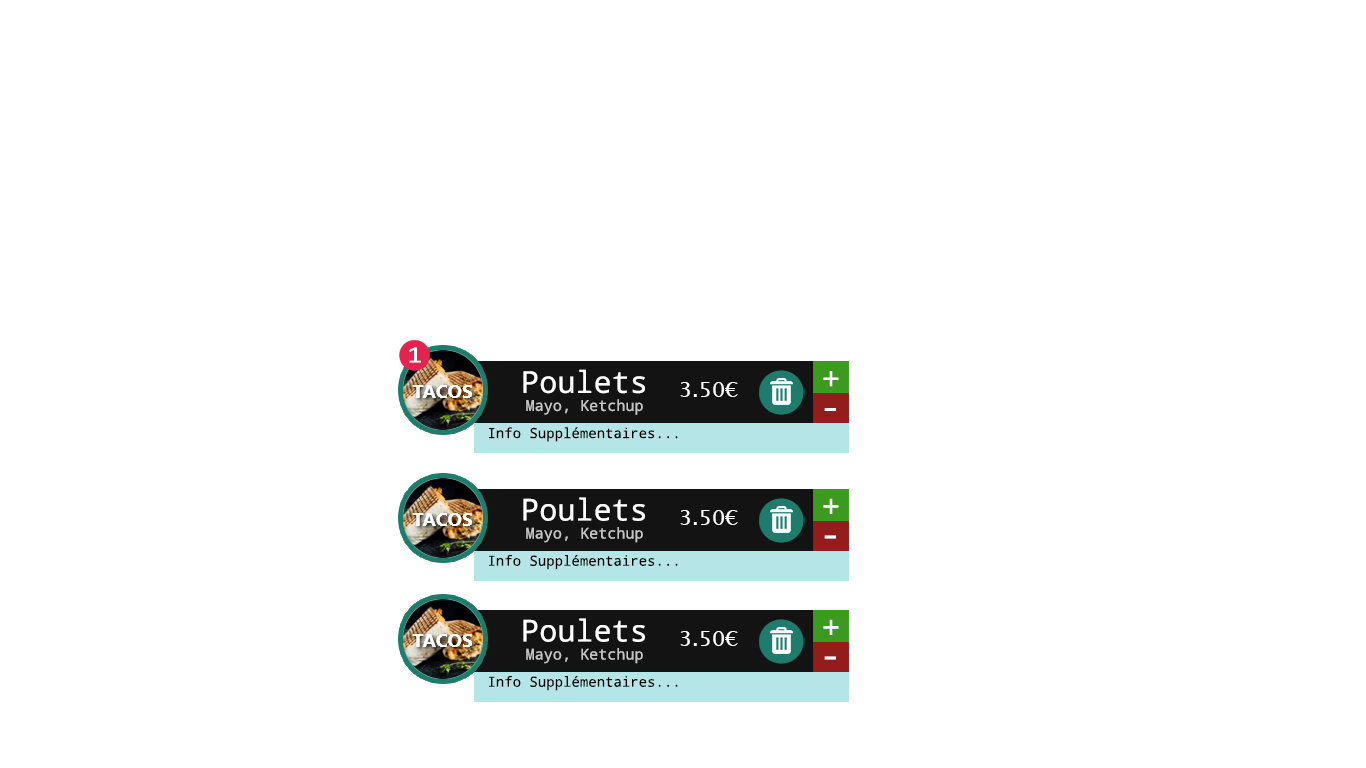
<style>
.page{position:relative;width:1366px;height:768px;background:#ffffff}
.page>*{position:absolute;margin:0}
.t1{font:23.5px "Calibri";color:#ffffff;scale:1.32 1}
.t2{font:30.2px "NotoMono";color:#ffffff}
.t3{font:33.2px "NotoMono";color:#ffffff}
.t4{font:21px "LucidaSansUnicode";color:#ffffff}
.t5{font:15.1px "NotoMono";color:#c5c5c5}
.t6{font:34px "NotoMono";color:#ffffff}
.t7{font:14px "NotoMono";color:#000000}
</style>
<div class="page">
<p class="t1" style="left:409px;top:347px;width:12px;height:16px">1</p>
<p class="t2" style="left:523px;top:369px;width:122px;height:25px">Poulets</p>
<p class="t3" style="left:823px;top:371px;width:16px;height:16px">+</p>
<p class="t4" style="left:680px;top:382px;width:58px;height:15px">3.50€</p>
<p class="t5" style="left:526px;top:399px;width:117px;height:16px">Mayo, Ketchup</p>
<p class="t6" style="left:824px;top:408px;width:12px;height:3px">-</p>
<p class="t7" style="left:489px;top:427px;width:189px;height:15px">Info Supplémentaires...</p>
<p class="t2" style="left:523px;top:497px;width:122px;height:24px">Poulets</p>
<p class="t4" style="left:680px;top:510px;width:58px;height:15px">3.50€</p>
<p class="t3" style="left:823px;top:498px;width:16px;height:16px">+</p>
<p class="t5" style="left:526px;top:527px;width:117px;height:16px">Mayo, Ketchup</p>
<p class="t6" style="left:824px;top:535px;width:12px;height:4px">-</p>
<p class="t7" style="left:489px;top:555px;width:189px;height:15px">Info Supplémentaires...</p>
<p class="t2" style="left:523px;top:618px;width:122px;height:24px">Poulets</p>
<p class="t3" style="left:823px;top:619px;width:16px;height:16px">+</p>
<p class="t4" style="left:680px;top:631px;width:58px;height:15px">3.50€</p>
<p class="t5" style="left:526px;top:648px;width:117px;height:16px">Mayo, Ketchup</p>
<p class="t6" style="left:824px;top:656px;width:12px;height:4px">-</p>
<p class="t7" style="left:489px;top:676px;width:189px;height:15px">Info Supplémentaires...</p>
</div>
